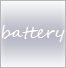
<style>
.page{position:relative;width:66px;height:68px}
.page>*{position:absolute;margin:0}
.t1{font:17.3px "SegoeScript";color:#ffffff}
</style>
<div class="page">
<p class="t1" style="left:1px;top:25px;width:64px;height:17px">battery</p>
</div>
